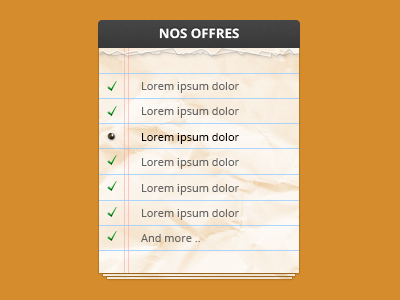
<style>
.page{position:relative;width:400px;height:300px;background:#d58c2c}
.page>*{position:absolute;margin:0}
.t1{font:13px "OpenSans-Bold";color:#ffffff}
.t2{font:11px/25.4px "OpenSans";color:#656565}
.t3{font:11px/25.4px "OpenSans";color:#000000}
</style>
<div class="page">
<p class="t1" style="left:159px;top:28px;width:80px;height:11px">NOS OFFRES</p>
<p class="t2" style="left:141px;top:82px;width:98px;height:160px">Lorem ipsum dolor<br>Lorem ipsum dolor<br><span class="t3">Lorem ipsum dolor<br></span>Lorem ipsum dolor<br>Lorem ipsum dolor<br>Lorem ipsum dolor<br>And more ..</p>
</div>
